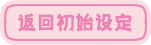
<style>
.page{position:relative;width:151px;height:45px;background:#f9dde0}
.page>*{position:absolute;margin:0}
.t1{font:12px "shetumodengxiaofangti";color:#eb84b4;font-weight:bold;scale:0.94 1}
</style>
<div class="page">
<p class="t1" style="left:18px;top:13px;width:114px;height:19px">返回初始设定</p>
</div>
